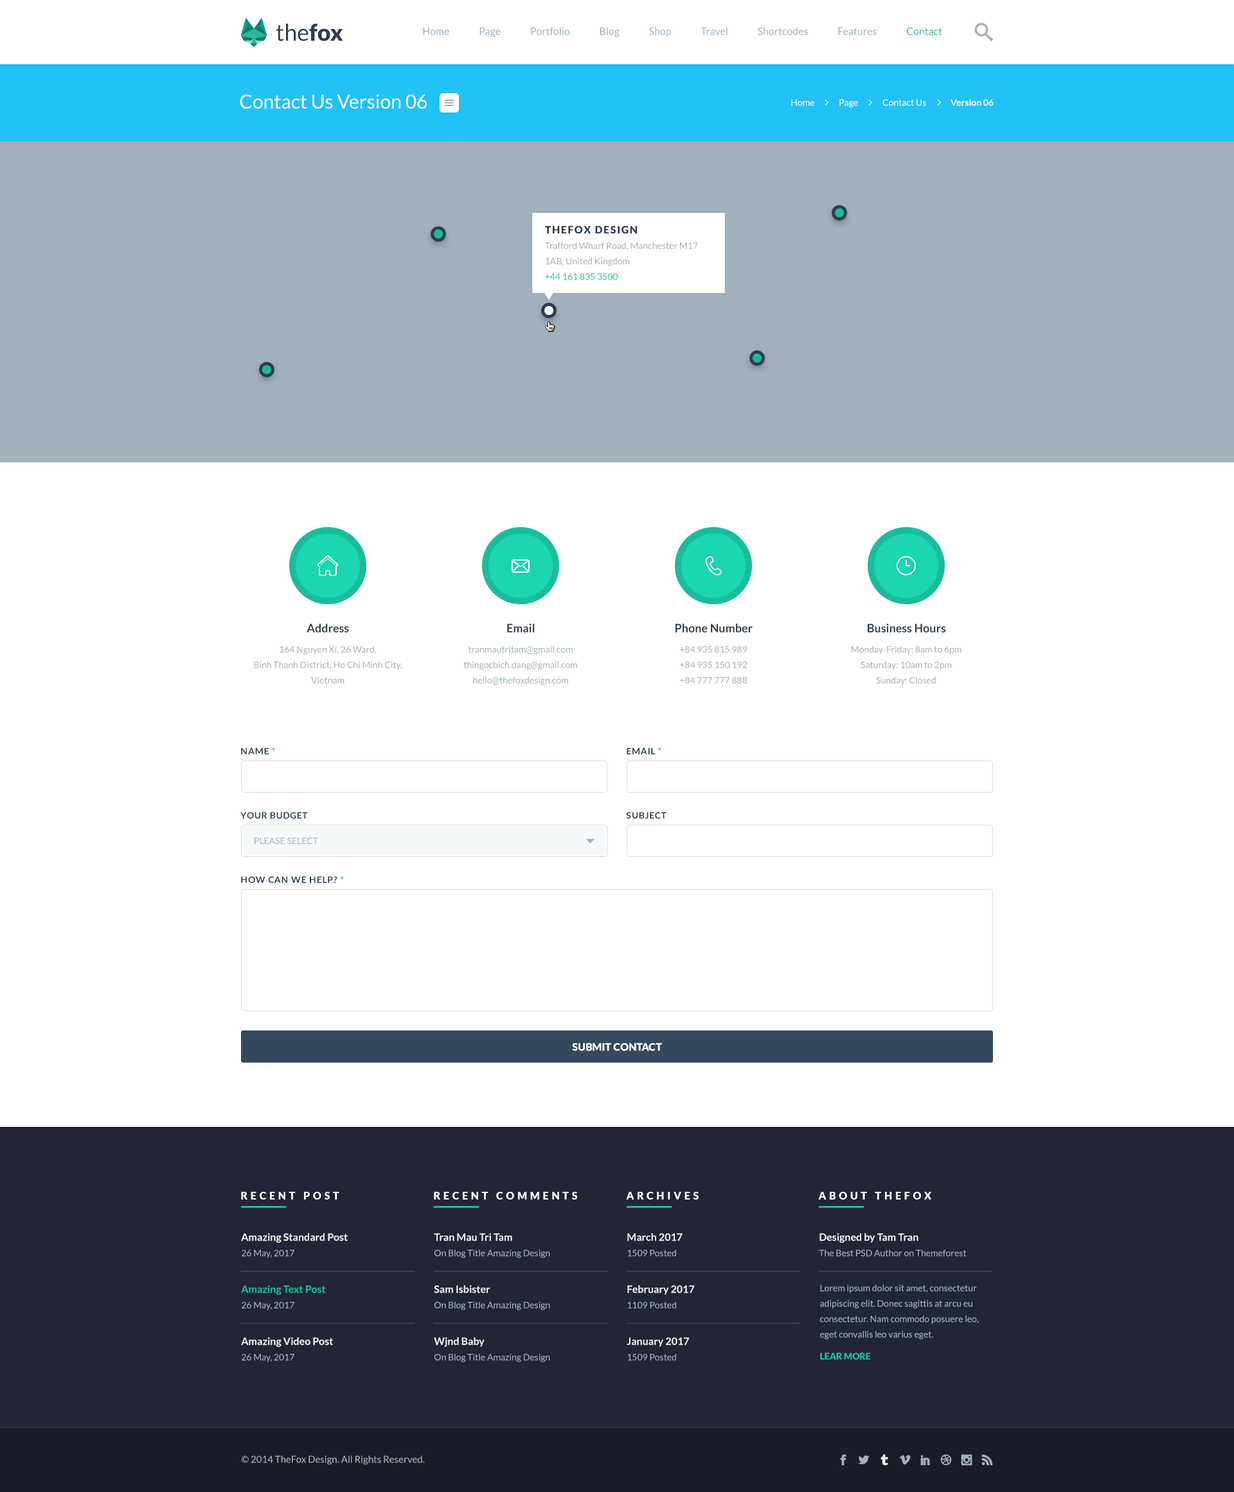
<style>
.page{position:relative;width:1234px;height:1492px;background:#ffffff}
.page>*{position:absolute;margin:0}
.t1{font:23.1px "Lato-Regular";color:#2c3e50}
.t2{font:23.1px "Lato-Black";color:#2c3e50}
.t3{font:10.3px "Lato-Regular";color:#a1b1bc}
.t4{font:10.3px "Lato-Regular";color:#1abc9c}
.t5{font:19.3px "Lato-Regular";color:#ffffff}
.t6{font:9px "Lato-Regular";color:#ffffff}
.t7{font:9px "Lato-Bold";color:#ffffff}
.t8{font:9px/15.4px "Lato-Regular";color:#a1b1bc}
.t9{font:10.3px/15.4px "Lato-Black";letter-spacing:0.1em;color:#2c3e50;text-transform:uppercase}
.t10{font:9px/15.4px "Lato-Regular";color:#1abc9c}
.t11{font:11.6px "Lato-Bold";color:#2c3e50}
.t12{font:9px "Lato-Bold";letter-spacing:0.05em;color:#2c3e50}
.t13{font:9px "Lato-Bold";letter-spacing:0.05em;color:#1abc9c}
.t14{font:9px "Lato-Regular";color:#a1b1bc;text-transform:uppercase}
.t15{font:10.3px "Lato-Black";color:#ffffff}
.t16{font:10.3px "Lato-Black";letter-spacing:0.3em;color:#ffffff}
.t17{font:10.3px/15.4px "Lato-Bold";color:#ecf0f1}
.t18{font:10.3px/15.4px "Lato-Bold";color:#1abc9c}
.t19{font:9px "Lato-Black";color:#1abc9c}
.t20{font:9.6px "Lato-Regular";color:#a1b1bc}
</style>
<div class="page">
<p class="t1" style="left:276px;top:23px;width:67px;height:18px">the<span class="t2">fox</span></p>
<p class="t3" style="left:423px;top:27px;width:519px;height:10px">Home               Page               Portfolio               Blog               Shop               Travel               Shortcodes               Features               <span class="t4">Contact</span></p>
<p class="t5" style="left:240px;top:94px;width:187px;height:15px">Contact Us Version 06</p>
<p class="t6" style="left:791px;top:99px;width:203px;height:8px">Home              Page              Contact Us              <span class="t7">Version 06</span></p>
<p class="t8" style="left:545px;top:226px;width:153px;height:54px"><span class="t9">TheFox Design<br></span>Trafford Wharf Road, Manchester M17 1AB, United Kingdom<br><span class="t10">+44 161 835 3500</span></p>
<p class="t11" style="left:307px;top:624px;width:42px;height:9px">Address</p>
<p class="t11" style="left:507px;top:624px;width:28px;height:9px">Email</p>
<p class="t11" style="left:676px;top:624px;width:77px;height:9px">Phone Number</p>
<p class="t11" style="left:868px;top:624px;width:78px;height:9px">Business Hours</p>
<p class="t8" style="left:254px;top:646px;width:148px;height:38px;text-align:center">164 Nguyen Xi, 26 Ward, <br>Binh Thanh District, Ho Chi Minh City, Vietnam</p>
<p class="t8" style="left:464px;top:646px;width:113px;height:39px;text-align:center">tranmautritam@gmail.com<br>thingocbich.dang@gmail.com<br>hello@thefoxdesign.com</p>
<p class="t8" style="left:680px;top:646px;width:68px;height:38px;text-align:center">+84 935 815 989<br>+84 935 150 192<br>+84 777 777 888</p>
<p class="t8" style="left:852px;top:646px;width:110px;height:39px;text-align:center">Monday-Friday: 8am to 6pm<br>Saturday: 10am to 2pm<br>Sunday: Closed</p>
<p class="t12" style="left:241px;top:748px;width:34px;height:7px">NAME <span class="t13">*</span></p>
<p class="t12" style="left:627px;top:748px;width:35px;height:7px">EMAIL <span class="t13">*</span></p>
<p class="t12" style="left:240px;top:812px;width:68px;height:7px">YOUR BUDGET</p>
<p class="t12" style="left:626px;top:812px;width:41px;height:7px">SUBJECT</p>
<p class="t14" style="left:255px;top:838px;width:63px;height:6px">Please Select</p>
<p class="t12" style="left:241px;top:876px;width:103px;height:7px">HOW CAN WE HELP? <span class="t13">*</span></p>
<p class="t15" style="left:572px;top:1043px;width:90px;height:8px">SUBMIT CONTACT</p>
<p class="t16" style="left:241px;top:1192px;width:98px;height:8px">RECENT POST</p>
<p class="t16" style="left:434px;top:1192px;width:143px;height:8px">RECENT COMMENTS</p>
<p class="t16" style="left:626px;top:1192px;width:73px;height:8px">ARCHIVES</p>
<p class="t16" style="left:818px;top:1192px;width:114px;height:8px">ABOUT THEFOX</p>
<p class="t17" style="left:241px;top:1233px;width:107px;height:25px">Amazing Standard Post<br><span class="t8">26 May, 2017</span></p>
<p class="t8" style="left:434px;top:1233px;width:116px;height:25px"><span class="t17">Tran Mau Tri Tam<br></span>On Blog Title Amazing Design</p>
<p class="t8" style="left:627px;top:1233px;width:56px;height:24px"><span class="t17">March 2017<br></span>1509 Posted</p>
<p class="t8" style="left:819px;top:1233px;width:148px;height:24px"><span class="t17">Designed by Tam Tran<br></span>The Best PSD Author on Themeforest</p>
<p class="t18" style="left:241px;top:1285px;width:85px;height:25px">Amazing Text Post<br><span class="t8">26 May, 2017</span></p>
<p class="t8" style="left:434px;top:1285px;width:116px;height:25px"><span class="t17">Sam Isbister<br></span>On Blog Title Amazing Design</p>
<p class="t17" style="left:627px;top:1285px;width:68px;height:24px">February 2017<br><span class="t8">1109 Posted</span></p>
<p class="t8" style="left:820px;top:1284px;width:159px;height:56px">Lorem ipsum dolor sit amet, consectetur adipiscing elit. Donec sagittis at arcu eu consectetur. Nam commodo posuere leo, eget convallis leo varius eget.</p>
<p class="t17" style="left:241px;top:1337px;width:92px;height:25px">Amazing Video Post<br><span class="t8">26 May, 2017</span></p>
<p class="t8" style="left:434px;top:1337px;width:116px;height:25px"><span class="t17">Wjnd Baby<br></span>On Blog Title Amazing Design</p>
<p class="t17" style="left:627px;top:1337px;width:62px;height:24px">January 2017<br><span class="t8">1509 Posted</span></p>
<p class="t19" style="left:820px;top:1353px;width:51px;height:7px">LEAR MORE</p>
<p class="t20" style="left:241px;top:1455px;width:184px;height:9px">© 2014 TheFox Design. All Rights Reserved.</p>
</div>
